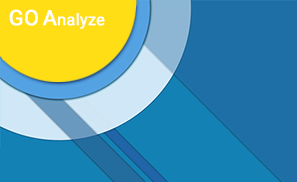
<style>
.page{position:relative;width:297px;height:182px;background:#1e6fa6}
.page>*{position:absolute;margin:0}
.t1{font:16px "Roboto-Regular";color:#ffffff;font-weight:bold}
.t2{font:21.3px "Roboto-Regular";color:#ffffff;font-weight:bold}
</style>
<div class="page">
<p class="t1" style="left:9px;top:9px;width:96px;height:20px"><span class="t2">GO A</span>nalyze</p>
</div>
